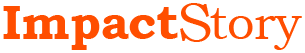
<style>
.page{position:relative;width:305px;height:53px;background:#ffffff}
.page>*{position:absolute;margin:0}
.t1{font:49.4px "BookmanOldStyle-Bold";letter-spacing:-0.01em;color:#ff4e00}
.t2{font:54.2px "BookmanOldStyle";letter-spacing:-0.01em;color:#ff4e00}
.t3{font:49.4px "BookmanOldStyle";letter-spacing:-0.01em;color:#ff4e00}
</style>
<div class="page">
<p class="t1" style="left:3px;top:6px;width:175px;height:44px">Impact</p>
<p class="t2" style="left:180px;top:3px;width:31px;height:39px">S</p>
<p class="t3" style="left:210px;top:8px;width:92px;height:42px">tory</p>
</div>
